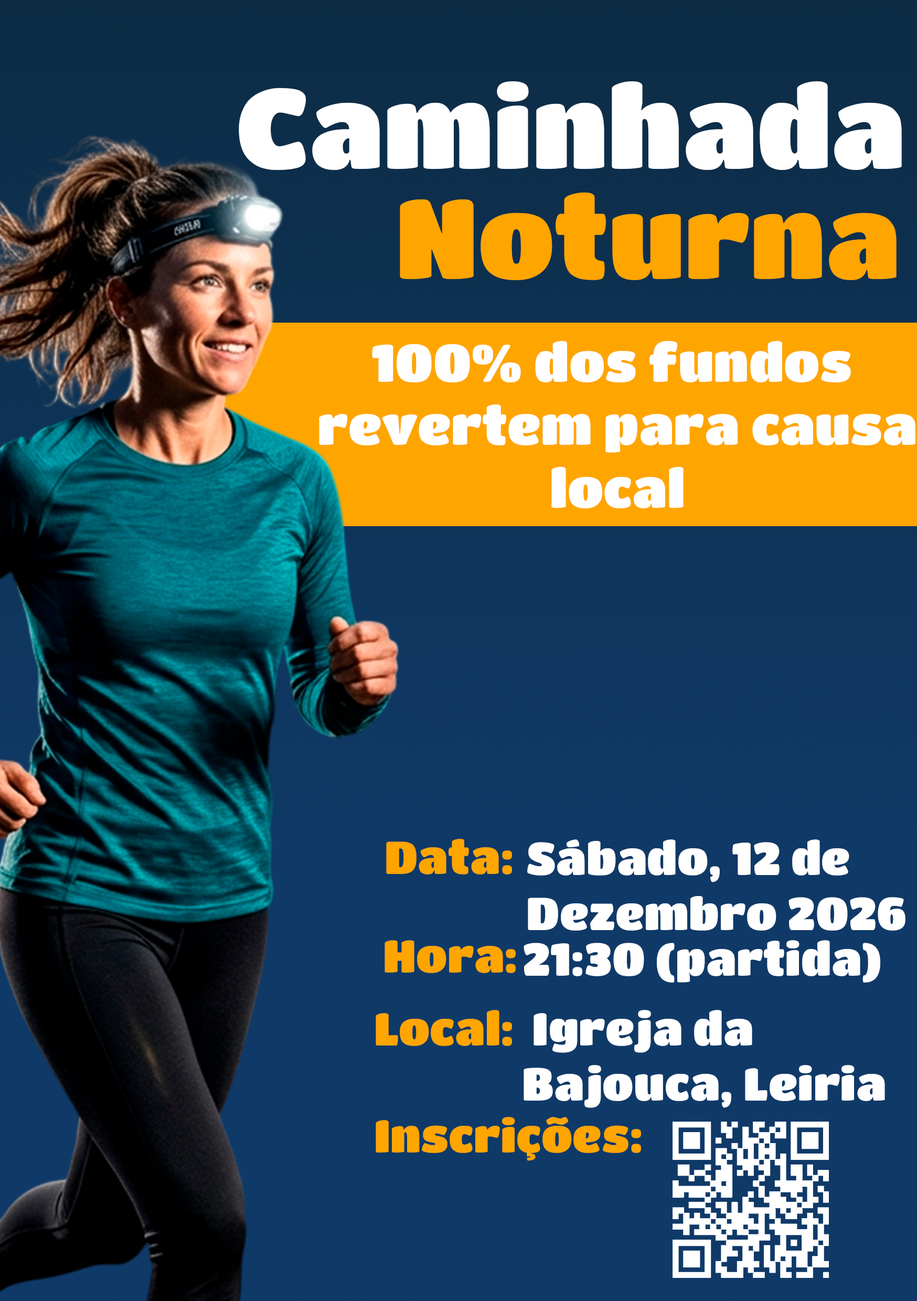
<style>
.page{position:relative;width:917px;height:1301px}
.page>*{position:absolute;margin:0}
.t1{font:112px "TitanOne";color:#ffffff}
.t2{font:112px "TitanOne";color:#ffa500}
.t3{font:52.4px "TitanOne";color:#ffffff}
.t4{font:45.6px "TitanOne";color:#ffa500}
.t5{font:45.6px "TitanOne";color:#ffffff}
</style>
<div class="page">
<p class="t1" style="left:239px;top:81px;width:663px;height:89px">Caminhada</p>
<p class="t2" style="left:400px;top:192px;width:496px;height:88px">Noturna</p>
<p class="t3" style="left:319px;top:341px;width:596px;height:167px;text-align:center">100% dos fundos <br>revertem para causa<br>local</p>
<p class="t4" style="left:386px;top:839px;width:126px;height:35px">Data:</p>
<p class="t5" style="left:527px;top:839px;width:378px;height:91px">Sábado, 12 de <br>Dezembro 2026</p>
<p class="t4" style="left:384px;top:940px;width:132px;height:33px">Hora:</p>
<p class="t5" style="left:523px;top:940px;width:357px;height:42px">21:30 (partida)</p>
<p class="t4" style="left:376px;top:1010px;width:136px;height:36px">Local:</p>
<p class="t5" style="left:523px;top:1010px;width:362px;height:98px">Igreja da <br>Bajouca, Leiria</p>
<p class="t4" style="left:376px;top:1117px;width:265px;height:44px">Inscrições:</p>
</div>
